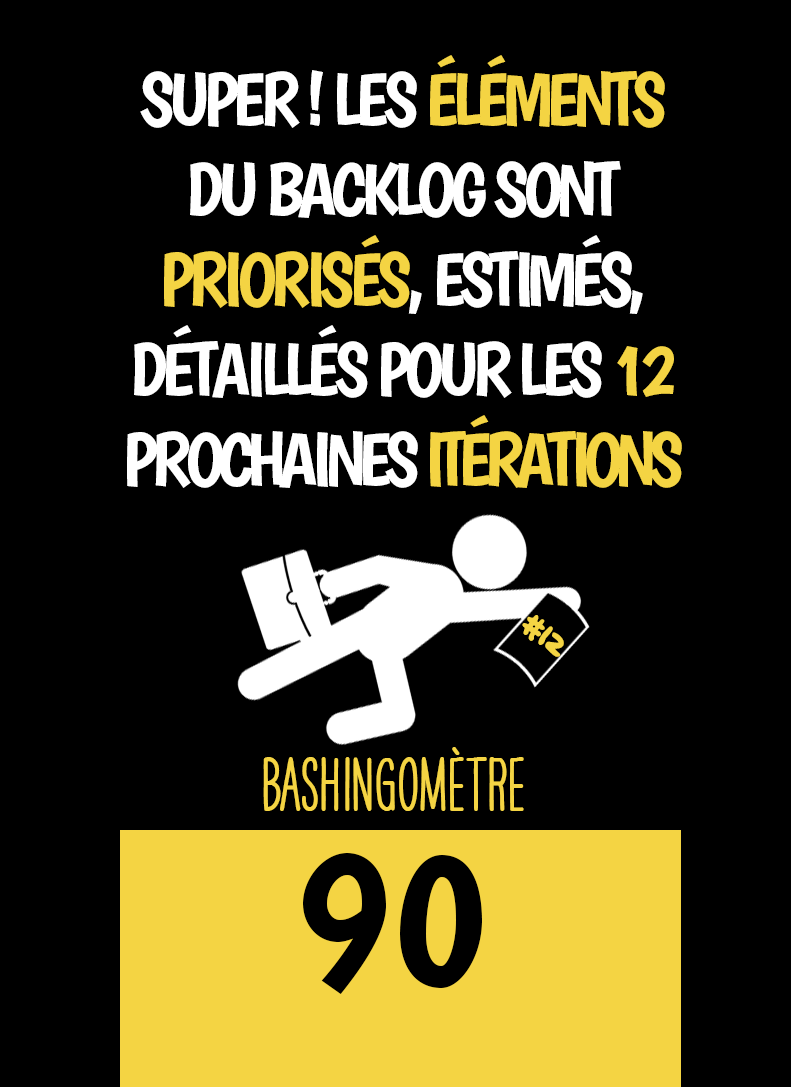
<style>
.page{position:relative;width:791px;height:1087px;background:#000000}
.page>*{position:absolute;margin:0}
.t1{font:75px "Boogaloo-Regular";letter-spacing:-0.08em;color:#ffffff}
.t2{font:75px "Boogaloo-Regular";letter-spacing:-0.08em;color:#f4d443}
.t3{font:75px "Boogaloo-Regular";letter-spacing:-0.1em;color:#ffffff}
.t4{font:75px "Boogaloo-Regular";letter-spacing:-0.1em;color:#f4d443}
.t5{font:37.5px "OakStreetW01-Regular";letter-spacing:-0.06em;color:#f4d443}
.t6{font:66.7px "HAVEANICEDAYTallW04-Bold";color:#f4d443}
.t7{font:200px "Boogaloo-Regular";color:#000000}
</style>
<div class="page">
<p class="t1" style="left:127px;top:55px;width:555px;height:433px;text-align:center">SUPER ! LES <span class="t2">ÉLÉMENTS </span>DU BACKLOG SONT <span class="t2">PRIORISÉS</span>, ESTIMÉS, DÉTAILLÉS POUR LES <span class="t2">12</span> PRO<span class="t3">CHAINES </span><span class="t4">ITÉRATIONS</span></p>
<p class="t5" style="left:522px;top:615px;width:42px;height:42px;rotate:42deg">#12</p>
<p class="t6" style="left:263px;top:747px;width:261px;height:64px">BASHINgomètre</p>
<p class="t7" style="left:303px;top:853px;width:179px;height:141px">90</p>
</div>
